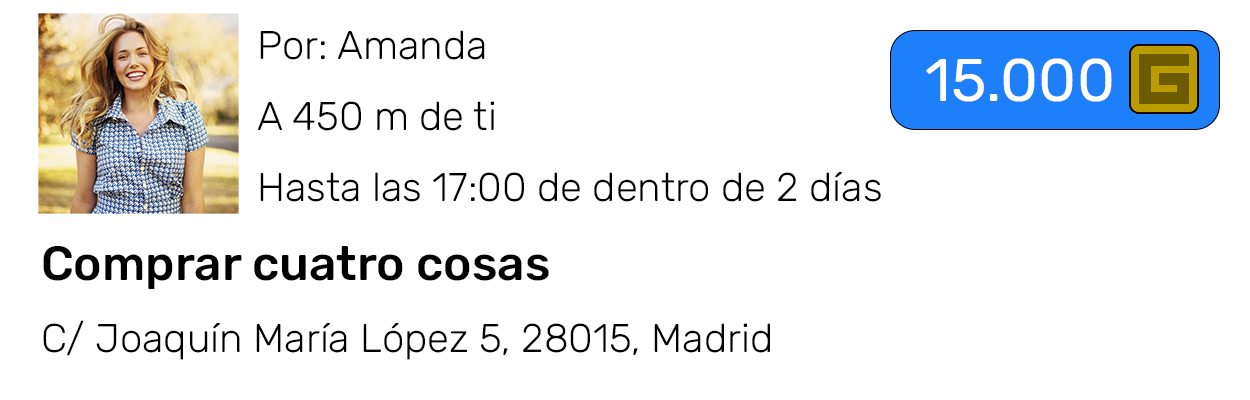
<style>
.page{position:relative;width:1250px;height:400px;background:#ffffff}
.page>*{position:absolute;margin:0}
.t1{font:40px "Rubik-Light";color:#000000}
.t2{font:10px "Roboto-Regular";color:#000000}
.t3{font:48px "Rubik-Medium";color:#000000}
.t4{font:60px "Rubik-Regular";color:#ffffff}
</style>
<div class="page">
<p class="t1" style="left:43px;top:30px;width:838px;height:330px"><span class="t2">      </span>Por: Amanda<br><br><br>      A 450 m de ti<br><br><br>      Hasta las 17:00 de dentro de 2 días<br><br><br><span class="t3">Comprar cuatro cosas<br><br></span>C/ Joaquín María López 5, 28015, Madrid</p>
<p class="t4" style="left:926px;top:58px;width:186px;height:44px">15.000</p>
</div>
